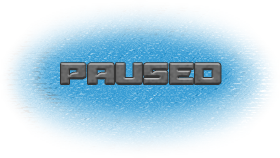
<style>
.page{position:relative;width:280px;height:158px}
.page>*{position:absolute;margin:0}
.t1{font:36px "Aircruiser";color:#666666}
</style>
<div class="page">
<p class="t1" style="left:61px;top:63px;width:160px;height:21px">Paused</p>
</div>
